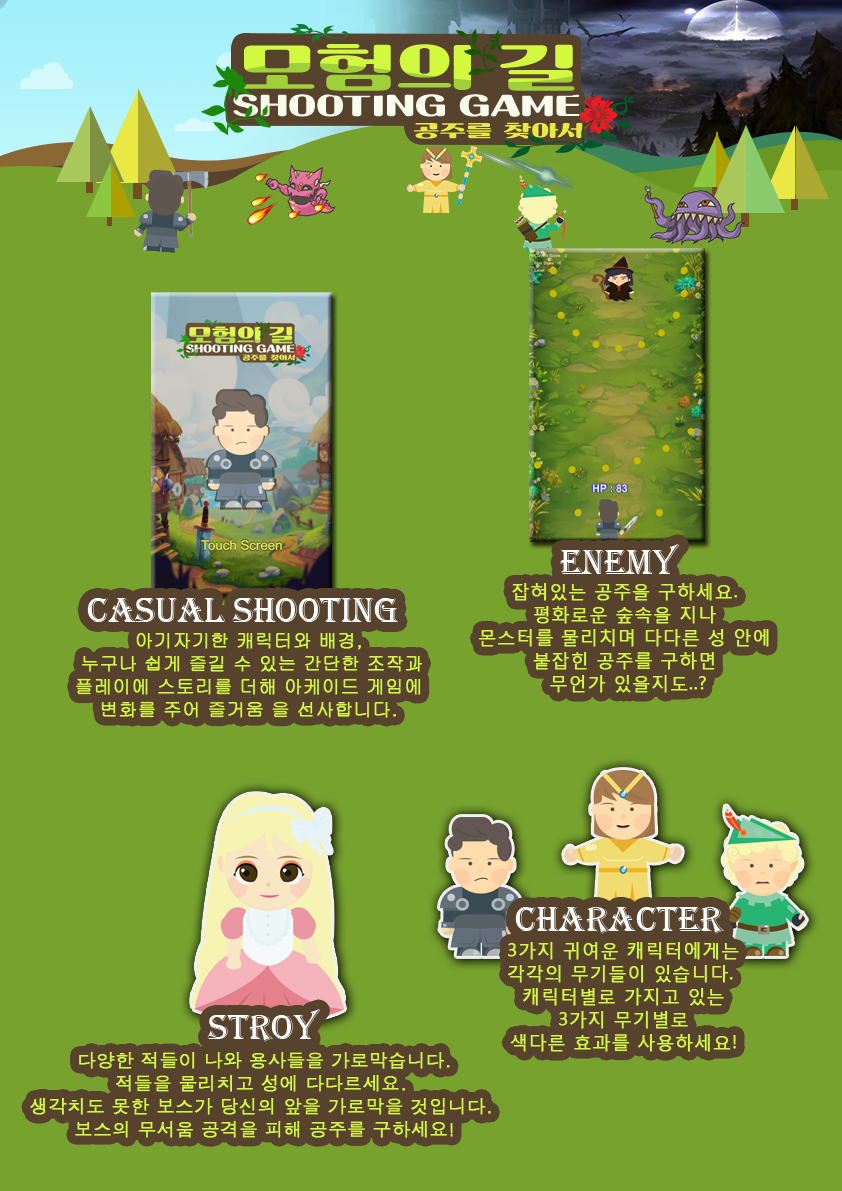
<style>
.page{position:relative;width:842px;height:1191px;background:#77a22e}
.page>*{position:absolute;margin:0}
.t1{font:36px "Algerian";color:#ffffff}
.t2{font:18.4px/23px "MalgunGothicRegular";color:#d2f840;font-weight:bold}
.t3{font:18.4px/23px "Gulim";color:#d2f840;font-weight:bold}
.t4{font:18.4px/23px "Dotum";color:#d2f840;font-weight:bold}
</style>
<div class="page">
<p class="t1" style="left:560px;top:544px;width:120px;height:30px">enemy</p>
<p class="t2" style="left:479px;top:583px;width:290px;height:110px;text-align:center">잡혀있는 공주을 구하세요. <br>평화로운 숲속을 지나 <br>몬스터를 물리치며 다다른 성 안에 <br>붙잡힌 공주를 구하면 <br>무언가 있을지도..?</p>
<p class="t1" style="left:87px;top:598px;width:311px;height:24px">Casual Shooting</p>
<p class="t3" style="left:76px;top:633px;width:346px;height:85px;text-align:center">아기자기한 캐릭터와 배경, <br>누구나 쉽게 즐길 수 있는 간단한 조작과<br>플레이에 스토리를 더해 아케이드 게임에 <br>변화를 주어 즐거움 을 선사합니다.</p>
<p class="t1" style="left:515px;top:907px;width:209px;height:27px">character</p>
<p class="t2" style="left:508px;top:942px;width:231px;height:110px;text-align:center">3가지 귀여운 캐릭터에게는 <br>각각의 무기들이 있습니다. <br>캐릭터별로 가지고 있는<br> 3가지 무기별로 <br>색다른 효과를 사용하세요!</p>
<p class="t1" style="left:207px;top:1009px;width:114px;height:33px">stroy</p>
<p class="t4" style="left:30px;top:1052px;width:461px;height:86px;text-align:center">다양한 적들이 나와 용사들을 가로막습니다. <br>적들을 물리치고 성에 다다르세요. <br>생각치도 못한 보스가 당신의 앞을 가로막을 것입니다. <br>보스의 무서움 공격을 피해 공주를 구하세요!</p>
</div>
